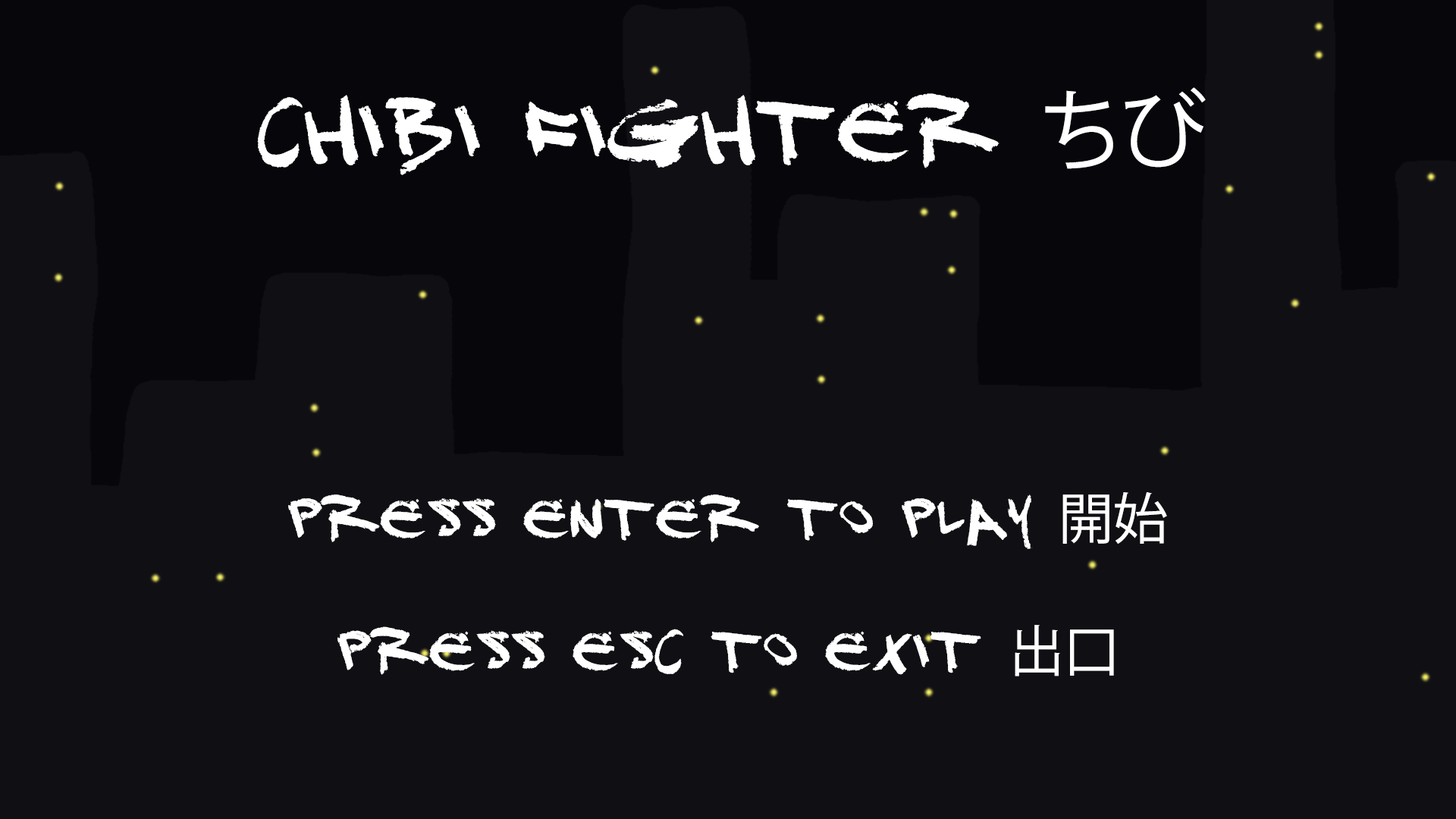
<style>
.page{position:relative;width:1456px;height:819px;background:#100f14}
.page>*{position:absolute;margin:0}
.t1{font:86.5px "DJ-Gross";letter-spacing:-0.01em;color:#ffffff}
.t2{font:86.5px "KozGoPr6N-Regular";letter-spacing:-0.01em;color:#ffffff}
.t3{font:55.2px "DJ-Gross";letter-spacing:-0.01em;color:#ffffff}
.t4{font:55.2px "KozGoPr6N-Regular";letter-spacing:-0.01em;color:#ffffff}
</style>
<div class="page">
<p class="t1" style="left:257px;top:87px;width:949px;height:88px">Chibi Fighter <span class="t2">ちび</span></p>
<p class="t3" style="left:288px;top:492px;width:879px;height:184px;text-align:center">Press enter to play <span class="t4">開始</span><br><br>press esc to exit <span class="t4">出口</span></p>
</div>
